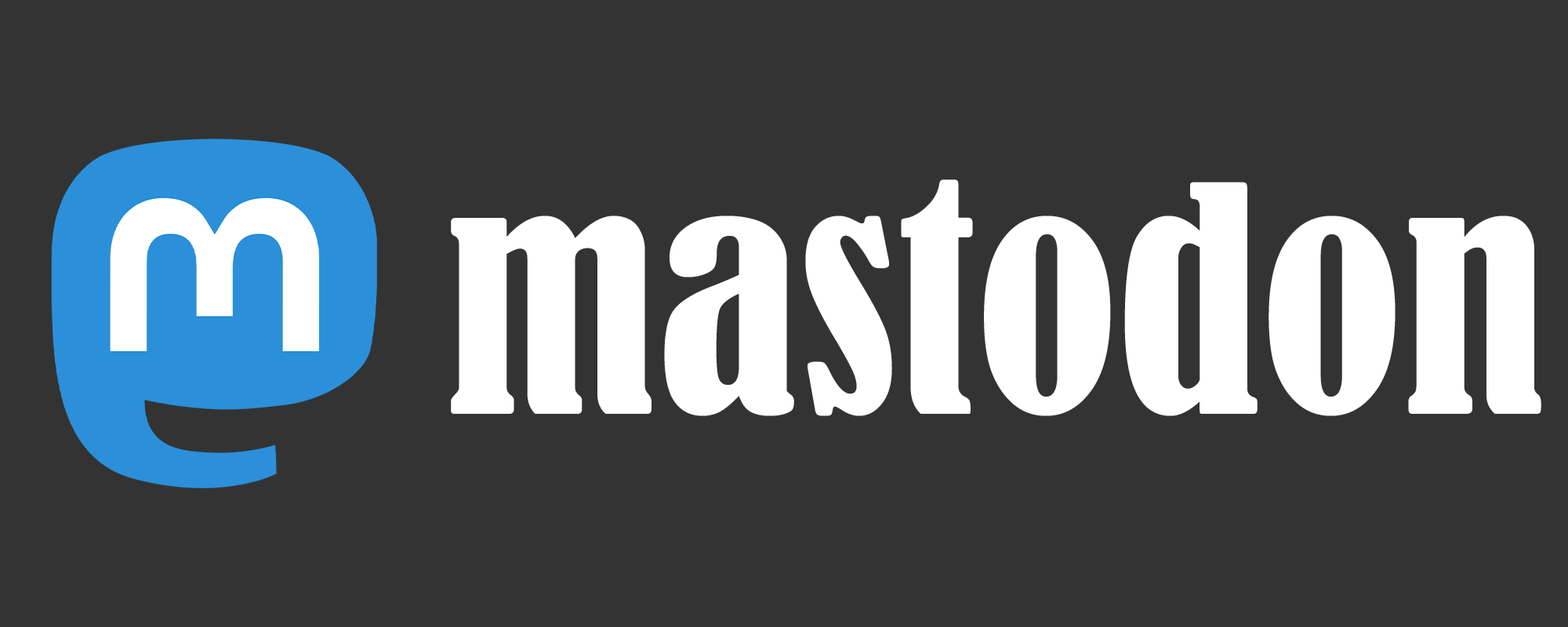
<style>
.page{position:relative;width:1568px;height:627px;background:#333333}
.page>*{position:absolute;margin:0}
.t1{font:294px "BernardMT-Condensed";color:#ffffff}
</style>
<div class="page">
<p class="t1" style="left:451px;top:180px;width:1090px;height:236px">mastodon</p>
</div>
